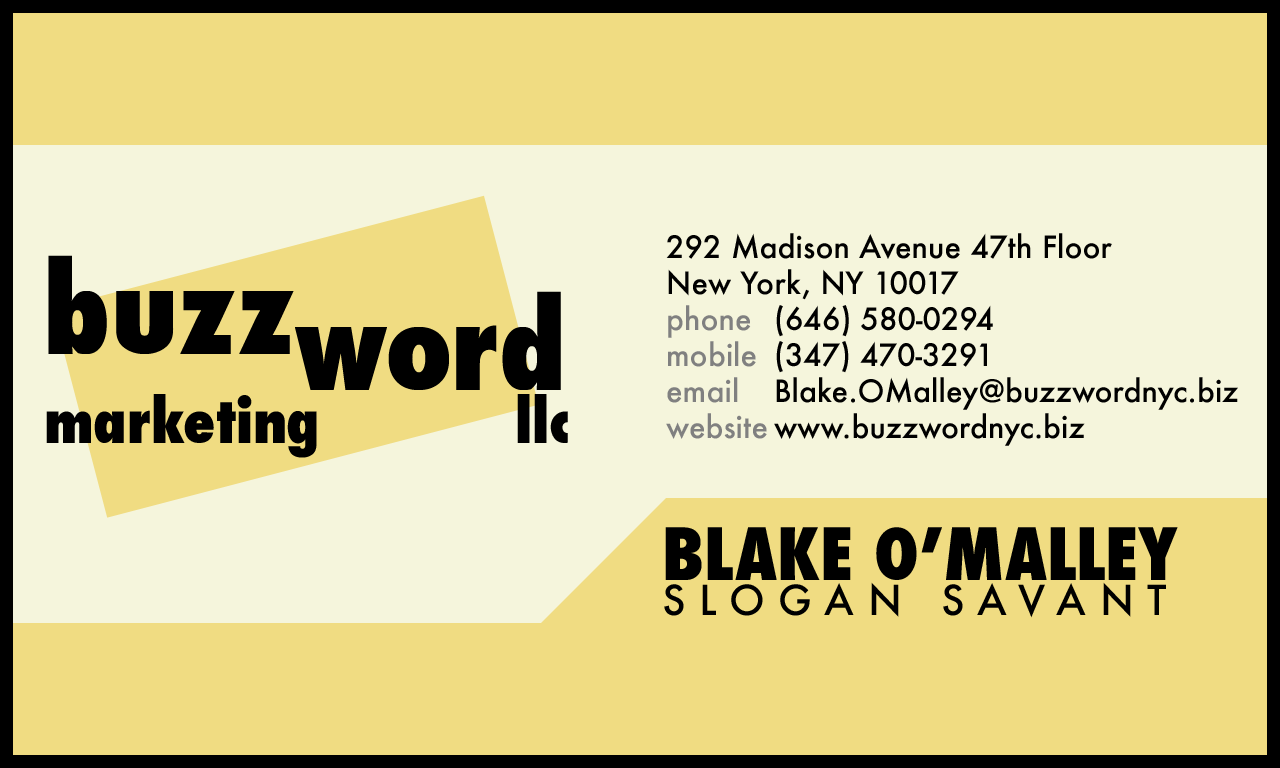
<style>
.page{position:relative;width:1280px;height:768px;background:#f0dc82}
.page>*{position:absolute;margin:0}
.t1{font:30px "Futura-Medium";color:#000000}
.t2{font:30px "Futura-Medium";color:#808080}
.t3{font:59.6px/16.6px "Futura-CondensedExtraBold";color:#000000}
.t4{font:119.2px/36.4px "Futura-CondensedExtraBold";color:#000000}
.t5{font:119.2px/0px "Futura-CondensedExtraBold";color:#000000}
.t6{font:70px "Futura-CondensedExtraBold";color:#000000}
.t7{font:40px/35px "Futura-Medium";letter-spacing:0.34em;color:#000000}
</style>
<div class="page">
<p class="t1" style="left:666px;top:233px;width:572px;height:213px">292 Madison Avenue 47th Floor<br>New York, NY 10017<br><span class="t2">phone </span>(646) 580-0294 <br><span class="t2">mobile </span>(347) 470-3291<br><span class="t2">email </span>Blake.OMalley@buzzwordnyc.biz<br><span class="t2">website </span>www.buzzwordnyc.biz</p>
<p class="t3" style="left:46px;top:255px;width:522px;height:203px"><span class="t4">buzz<br></span><span class="t5">       word <br><br></span>marketing         llc</p>
<p class="t6" style="left:664px;top:527px;width:514px;height:91px">BLAKE O’MALLEY<br><span class="t7">SLOGAN SAVANT</span></p>
</div>
